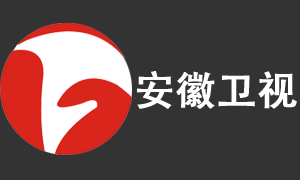
<style>
.page{position:relative;width:300px;height:180px;background:#333333}
.page>*{position:absolute;margin:0}
.t1{font:40px "AdobeHeitiStd-Regular";color:#ffffff;font-weight:bold}
</style>
<div class="page">
<p class="t1" style="left:137px;top:71px;width:160px;height:38px">安徽卫视</p>
</div>
